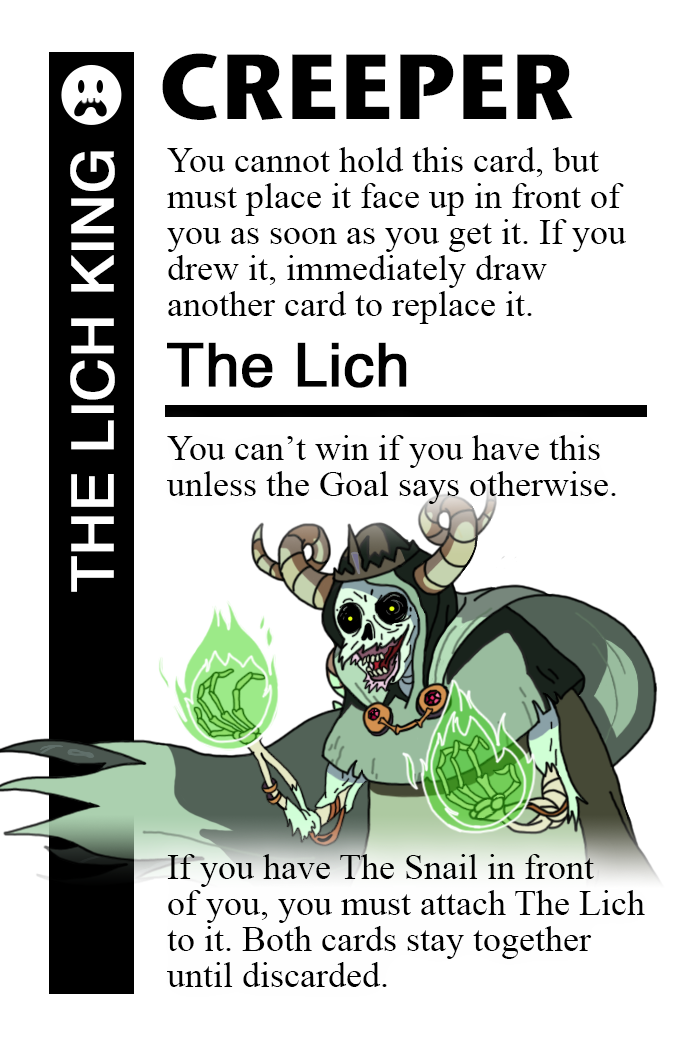
<style>
.page{position:relative;width:700px;height:1042px;background:#ffffff}
.page>*{position:absolute;margin:0}
.t1{font:92px "StoneSansITC-Bold";color:#000000}
.t2{font:36px/36px "TimesNewRomanPSMT";color:#000000}
.t3{font:58px "Helvetica";color:#ffffff;font-weight:bold}
.t4{font:60px "Helvetica";color:#000000;font-weight:bold}
</style>
<div class="page">
<p class="t1" style="left:162px;top:53px;width:411px;height:67px">CREEPER</p>
<p class="t2" style="left:167px;top:147px;width:459px;height:177px">You cannot hold this card, but<br>must place it face up in front of<br>you as soon as you get it. If you <br>drew it, immediately draw<br>another card to replace it.</p>
<p class="t3" style="left:70px;top:151px;width:45px;height:441px;rotate:-90deg">THE LICH KING</p>
<p class="t4" style="left:167px;top:342px;width:240px;height:46px">The Lich</p>
<p class="t2" style="left:167px;top:435px;width:449px;height:69px">You can’t win if you have this <br>unless the Goal says otherwise.</p>
<p class="t2" style="left:167px;top:854px;width:478px;height:133px">If you have The Snail in front<br>of you, you must attach The Lich<br>to it. Both cards stay together <br>until discarded.</p>
</div>
